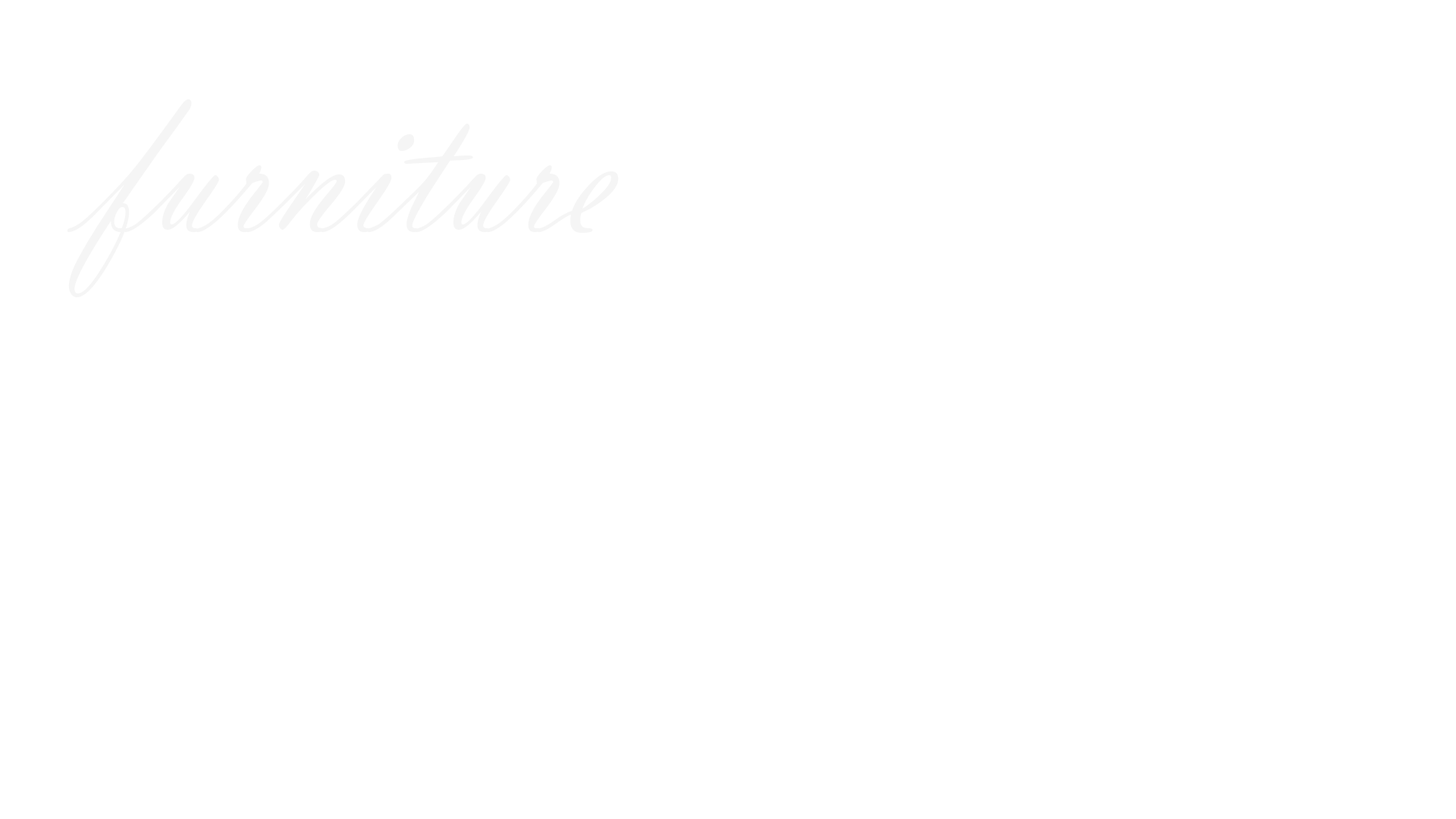
<style>
.page{position:relative;width:1456px;height:819px;background:#ffffff}
.page>*{position:absolute;margin:0}
.t1{font:375.7px "VladimirScript";color:#f5f5f5;scale:0.81 1}
</style>
<div class="page">
<p class="t1" style="left:67px;top:99px;width:552px;height:198px">furniture</p>
</div>
